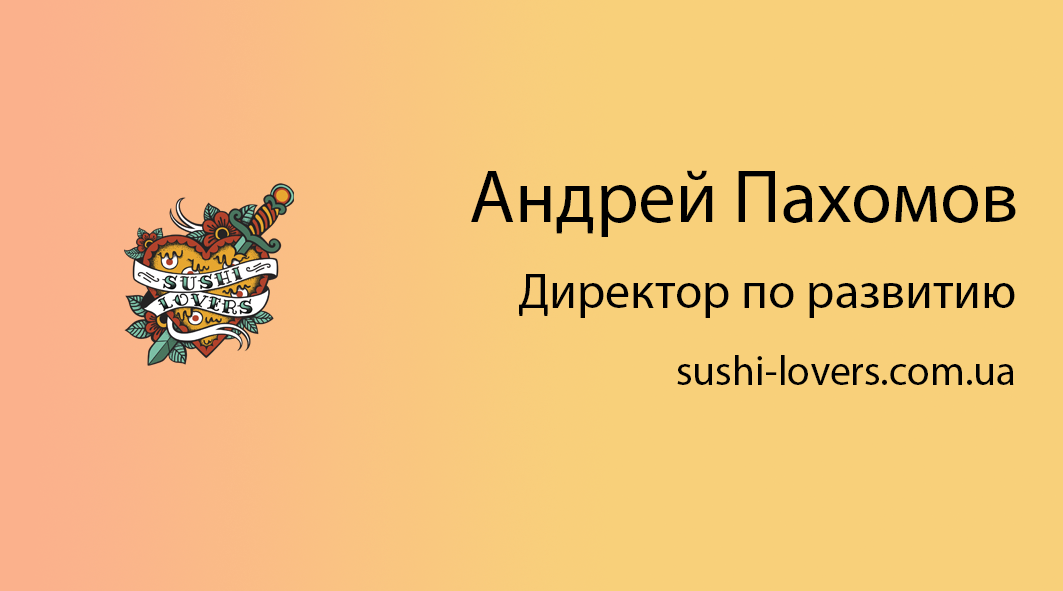
<style>
.page{position:relative;width:1063px;height:591px;background:#f8d07a}
.page>*{position:absolute;margin:0}
.t1{font:75px "MyriadPro-Regular";color:#000000}
.t2{font:50px "MyriadPro-Regular";color:#000000}
.t3{font:41.7px "MyriadPro-Regular";color:#000000}
</style>
<div class="page">
<p class="t1" style="left:471px;top:170px;width:545px;height:67px">Андрей Пахомов</p>
<p class="t2" style="left:519px;top:274px;width:496px;height:44px">Директор по развитию</p>
<p class="t3" style="left:677px;top:355px;width:337px;height:30px">sushi-lovers.com.ua</p>
</div>
